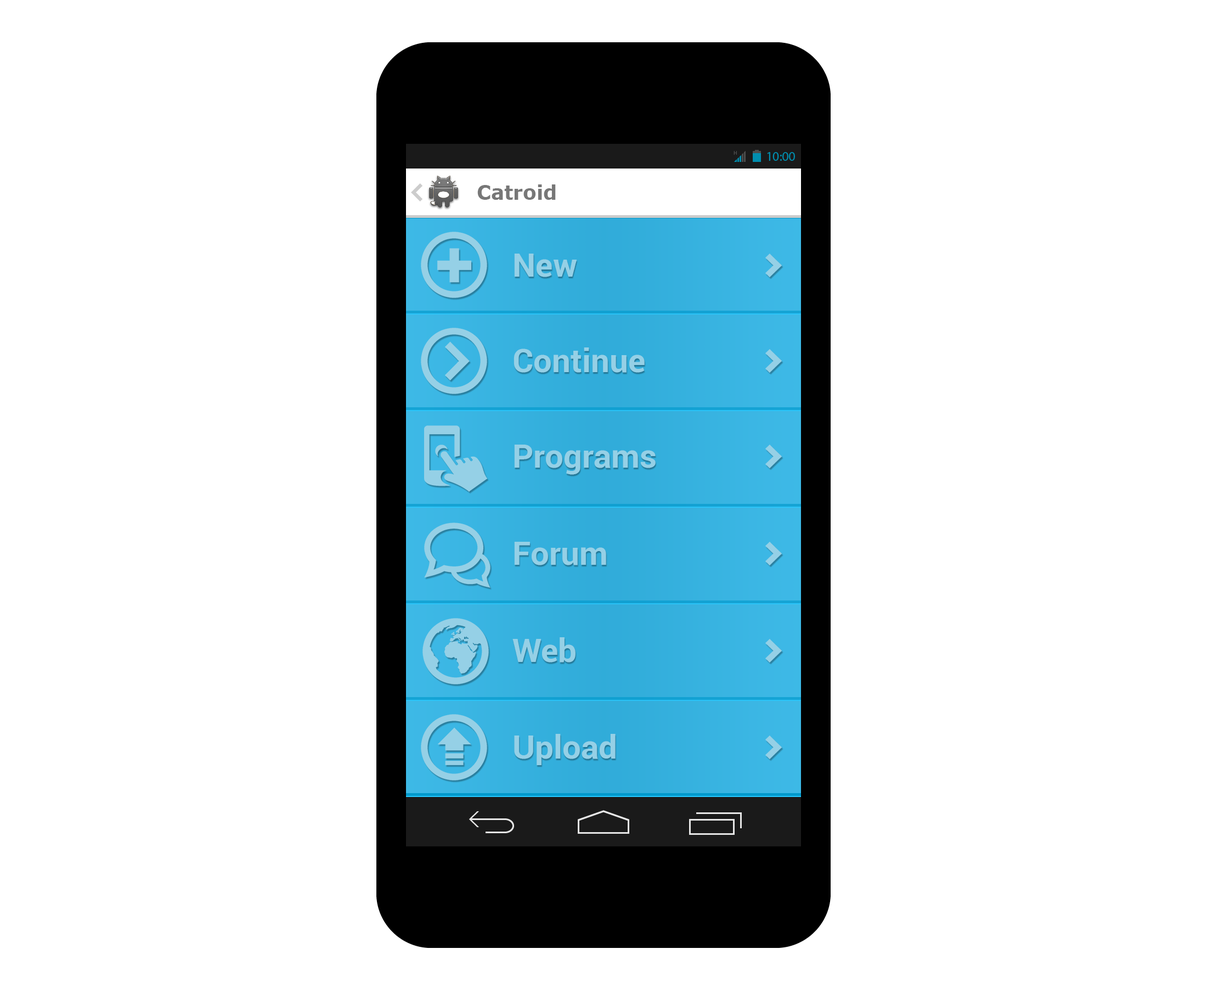
<style>
.page{position:relative;width:1207px;height:988px;background:#ffffff}
.page>*{position:absolute;margin:0}
.t1{font:19.8px "Verdana-Bold";color:#777777}
.t2{font:32.9px "Roboto-Bold";color:#95d0e6}
</style>
<div class="page">
<p class="t1" style="left:477px;top:184px;width:79px;height:16px">Catroid</p>
<p class="t2" style="left:514px;top:254px;width:63px;height:23px">New</p>
<p class="t2" style="left:514px;top:347px;width:131px;height:26px">Continue</p>
<p class="t2" style="left:514px;top:444px;width:142px;height:31px">Programs</p>
<p class="t2" style="left:514px;top:542px;width:92px;height:23px">Forum</p>
<p class="t2" style="left:513px;top:637px;width:63px;height:25px">Web</p>
<p class="t2" style="left:514px;top:734px;width:102px;height:31px">Upload</p>
</div>
